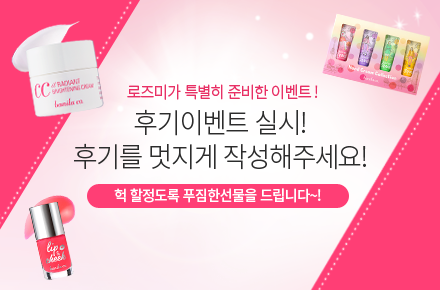
<style>
.page{position:relative;width:440px;height:290px;background:#ff3e75}
.page>*{position:absolute;margin:0}
.t1{font:16.2px "NotoSansCJKkr-DemiLight";letter-spacing:-0.05em;color:#e83065;scale:0.95 1}
.t2{font:27.8px "NotoSansCJKkr-Light";letter-spacing:-0.05em;color:#2c2c2c;scale:0.95 1}
.t3{font:15px "NotoSansCJKkr-Medium";letter-spacing:-0.05em;color:#ffffff;scale:0.95 1}
</style>
<div class="page">
<p class="t1" style="left:127px;top:84px;width:191px;height:16px">로즈미가 특별히 준비한 이벤트 !</p>
<p class="t2" style="left:74px;top:109px;width:292px;height:61px;text-align:center">후기이벤트 실시!<br>후기를 멋지게 작성해주세요!</p>
<p class="t3" style="left:114px;top:188px;width:207px;height:15px">헉 할정도록 푸짐한선물을 드립니다~!</p>
</div>
